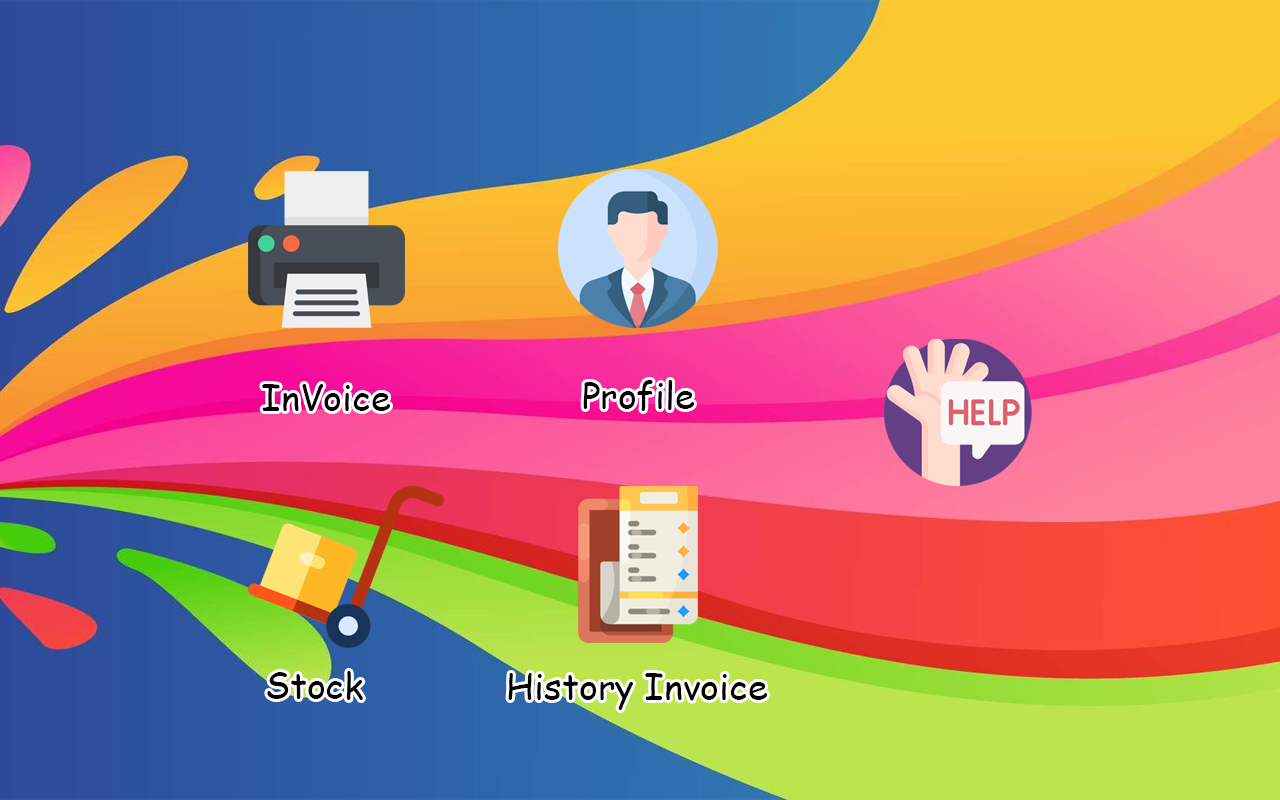
<style>
.page{position:relative;width:1280px;height:800px}
.page>*{position:absolute;margin:0}
.t1{font:36px "ComicSansMS";color:#000000}
</style>
<div class="page">
<p class="t1" style="left:262px;top:384px;width:128px;height:27px">InVoice</p>
<p class="t1" style="left:583px;top:380px;width:111px;height:31px">Profile</p>
<p class="t1" style="left:267px;top:671px;width:96px;height:29px">Stock</p>
<p class="t1" style="left:508px;top:673px;width:259px;height:37px">History Invoice</p>
</div>
